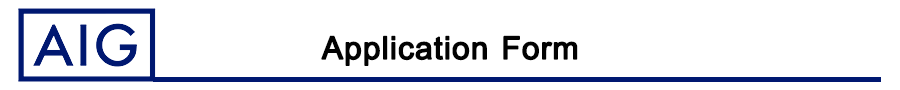
<style>
.page{position:relative;width:900px;height:90px;background:#ffffff}
.page>*{position:absolute;margin:0}
.t1{font:48px "BrowalliaUPC";color:#020202;font-weight:bold}
</style>
<div class="page">
<p class="t1" style="left:321px;top:35px;width:257px;height:31px">Application Form</p>
</div>
